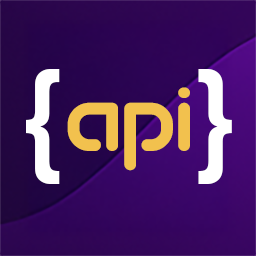
<style>
.page{position:relative;width:256px;height:256px}
.page>*{position:absolute;margin:0}
.t1{font:144px "BebasNeue-Regular";color:#ffffff}
.t2{font:100px "TogfontRegular";color:#f2c14e}
</style>
<div class="page">
<p class="t1" style="left:26px;top:69px;width:34px;height:115px">{</p>
<p class="t1" style="left:198px;top:69px;width:34px;height:115px">}</p>
<p class="t2" style="left:67px;top:87px;width:123px;height:84px">api</p>
</div>
